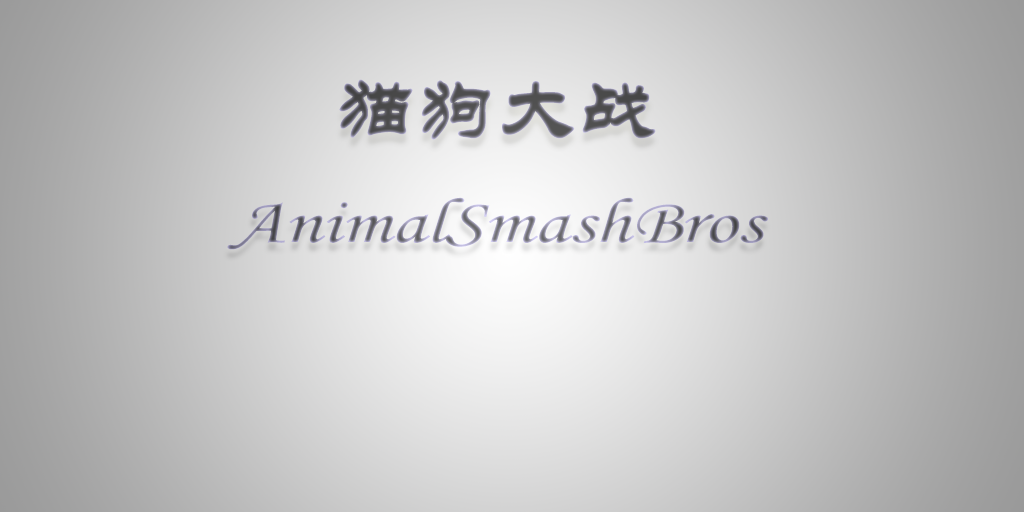
<style>
.page{position:relative;width:1024px;height:512px}
.page>*{position:absolute;margin:0}
.t1{font:80px "STLiti";font-weight:bold}
.t2{font:64px "STLiti";scale:1.3 1}
</style>
<div class="page">
<p class="t1" style="left:339px;top:79px;width:317px;height:61px">猫狗大战</p>
<p class="t2" style="left:227px;top:197px;width:541px;height:53px">AnimalSmashBros</p>
</div>
